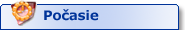
<style>
.page{position:relative;width:185px;height:30px}
.page>*{position:absolute;margin:0}
.t1{font:13px "Verdana-Bold";color:#003399}
</style>
<div class="page">
<p class="t1" style="left:44px;top:9px;width:55px;height:12px">Počasie</p>
</div>
